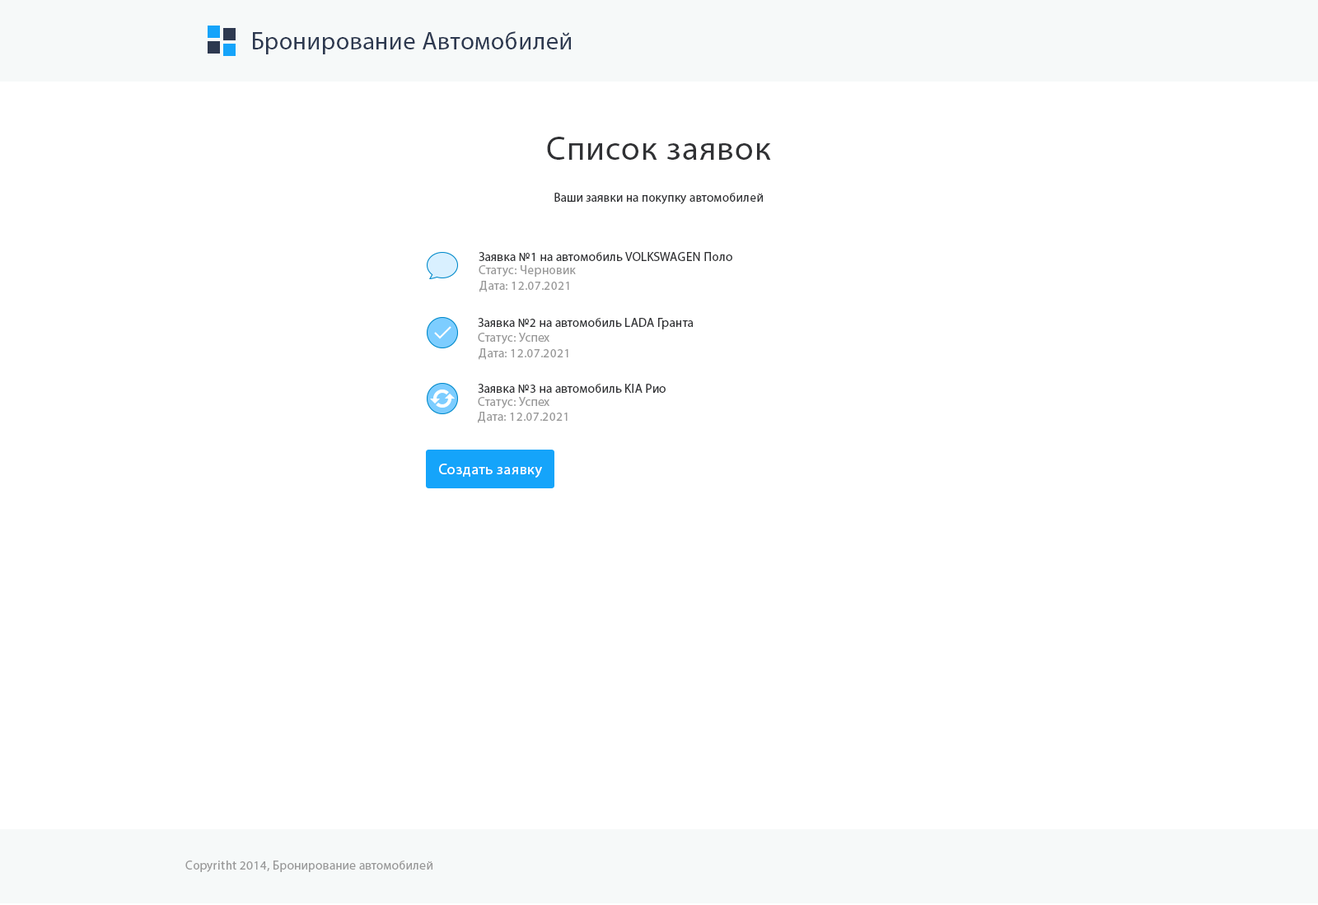
<style>
.page{position:relative;width:1318px;height:905px;background:#ffffff}
.page>*{position:absolute;margin:0}
.t1{font:24.7px "MyriadPro-Regular";letter-spacing:0.025em;color:#2d3950}
.t2{font:33.8px "MyriadPro-Regular";letter-spacing:0.025em;color:#303134}
.t3{font:12.4px "MyriadPro-Regular";letter-spacing:0.025em;color:#303134}
.t4{font:12.4px "MyriadPro-Regular";letter-spacing:0.025em;color:#999999}
.t5{font:14.8px "MyriadPro-Regular";letter-spacing:0.025em;color:#ffffff}
</style>
<div class="page">
<p class="t1" style="left:253px;top:31px;width:318px;height:23px">Бронирование Автомобилей</p>
<p class="t2" style="left:547px;top:137px;width:224px;height:23px">Список заявок</p>
<p class="t3" style="left:554px;top:193px;width:209px;height:11px">Ваши заявки на покупку автомобилей</p>
<p class="t3" style="left:478px;top:252px;width:254px;height:9px">Заявка №1 на автомобиль VOLKSWAGEN Поло</p>
<p class="t4" style="left:478px;top:265px;width:98px;height:12px">Статус: Черновик</p>
<p class="t4" style="left:479px;top:281px;width:90px;height:11px">Дата: 12.07.2021</p>
<p class="t3" style="left:478px;top:318px;width:215px;height:11px">Заявка №2 на автомобиль LADA Гранта</p>
<p class="t4" style="left:478px;top:333px;width:71px;height:11px">Статус: Успех</p>
<p class="t4" style="left:478px;top:348px;width:90px;height:12px">Дата: 12.07.2021</p>
<p class="t3" style="left:478px;top:384px;width:187px;height:9px">Заявка №3 на автомобиль KIA Рио</p>
<p class="t4" style="left:478px;top:397px;width:71px;height:11px">Статус: Успех</p>
<p class="t4" style="left:478px;top:412px;width:89px;height:11px">Дата: 12.07.2021</p>
<p class="t5" style="left:439px;top:464px;width:103px;height:14px">Создать заявку</p>
<p class="t4" style="left:185px;top:861px;width:247px;height:11px">Copyritht 2014, Бронирование автомобилей</p>
</div>
